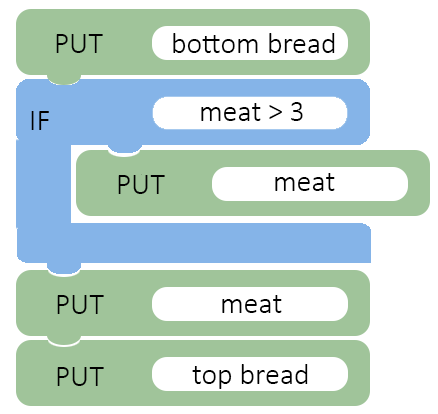
<style>
.page{position:relative;width:438px;height:414px;background:#ffffff}
.page>*{position:absolute;margin:0}
.t1{font:30px "Calibri-Light";color:#000000}
</style>
<div class="page">
<p class="t1" style="left:56px;top:34px;width:47px;height:19px">PUT</p>
<p class="t1" style="left:173px;top:33px;width:162px;height:20px">bottom bread</p>
<p class="t1" style="left:201px;top:102px;width:102px;height:19px">meat &gt; 3</p>
<p class="t1" style="left:31px;top:111px;width:18px;height:19px">IF</p>
<p class="t1" style="left:275px;top:173px;width:60px;height:18px">meat</p>
<p class="t1" style="left:118px;top:175px;width:47px;height:19px">PUT</p>
<p class="t1" style="left:57px;top:295px;width:47px;height:19px">PUT</p>
<p class="t1" style="left:222px;top:295px;width:60px;height:18px">meat</p>
<p class="t1" style="left:192px;top:364px;width:116px;height:25px">top bread</p>
<p class="t1" style="left:57px;top:367px;width:47px;height:19px">PUT</p>
</div>
